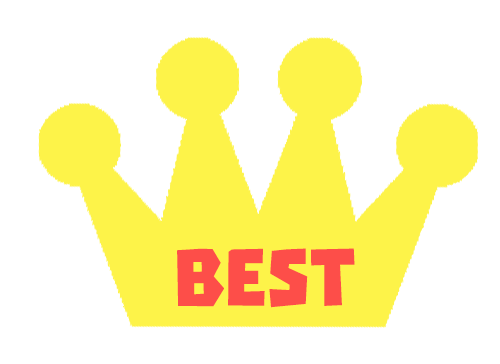
<style>
.page{position:relative;width:500px;height:364px;background:#ffffff}
.page>*{position:absolute;margin:0}
.t1{font:91.7px "Troika";color:#fd4e49;text-transform:uppercase}
</style>
<div class="page">
<p class="t1" style="left:177px;top:248px;width:178px;height:60px">best</p>
</div>
